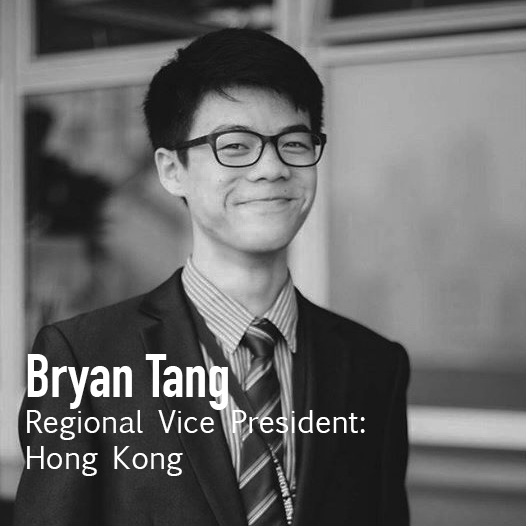
<style>
.page{position:relative;width:526px;height:526px}
.page>*{position:absolute;margin:0}
.t1{font:30px "EuphemiaUCAS";color:#ffffff}
.t2{font:60px "DINCondensed-Bold";color:#ffffff}
</style>
<div class="page">
<p class="t1" style="left:27px;top:354px;width:338px;height:122px"><span class="t2">Bryan Tang<br></span>Regional Vice President: <br>Hong Kong</p>
</div>
